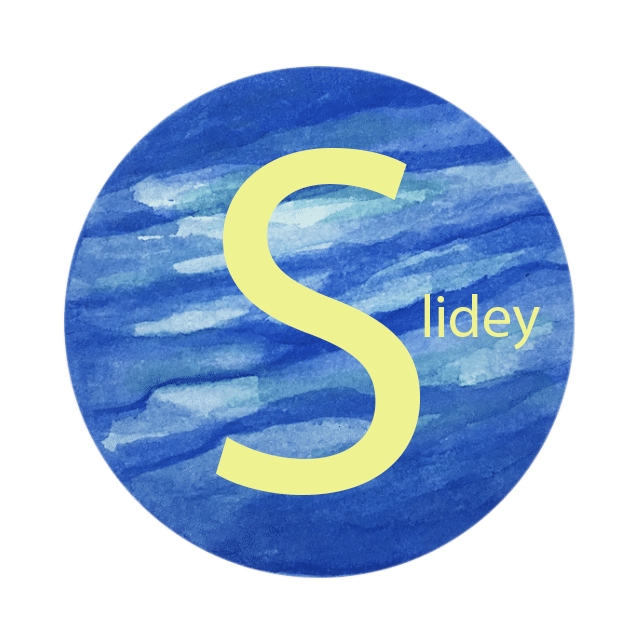
<style>
.page{position:relative;width:636px;height:642px;background:#ffffff}
.page>*{position:absolute;margin:0}
.t1{font:500px "MyriadPro-Regular";color:#eff291}
.t2{font:60px "MyriadPro-Regular";color:#eff291}
</style>
<div class="page">
<p class="t1" style="left:216px;top:148px;width:204px;height:347px">S</p>
<p class="t2" style="left:424px;top:294px;width:116px;height:56px">lidey</p>
</div>
